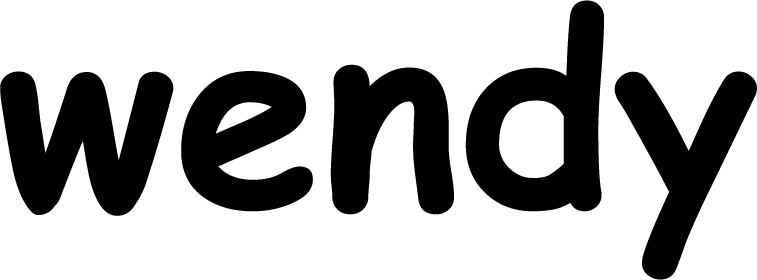
<style>
.page{position:relative;width:757px;height:280px;background:#ffffff}
.page>*{position:absolute;margin:0}
.t1{font:262.8px "ComicSansMS-Bold";color:#000000}
</style>
<div class="page">
<p class="t1" style="left:0px;top:0px;width:757px;height:280px">wendy</p>
</div>
